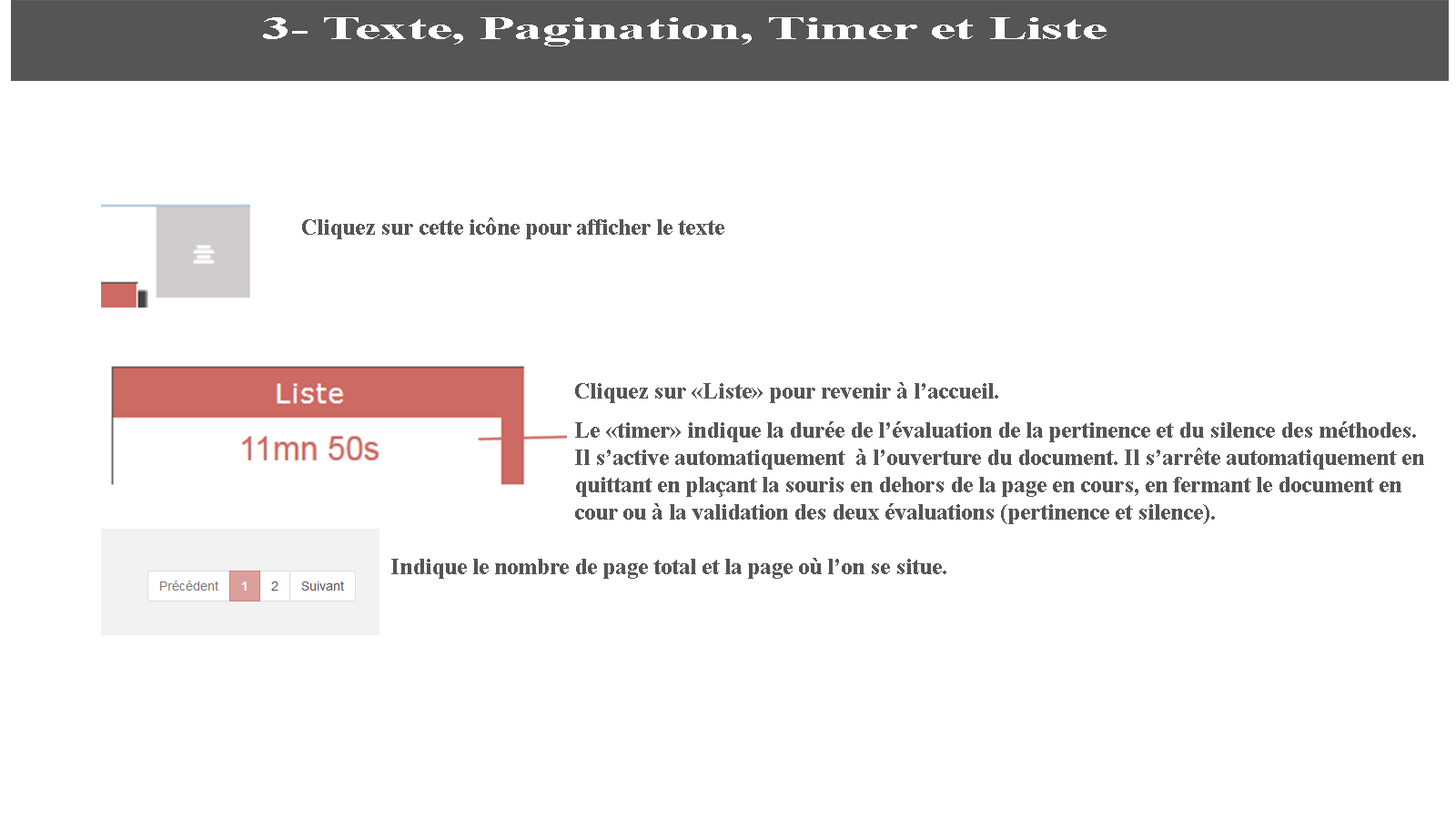
<style>
.page{position:relative;width:1456px;height:819px;background:#ffffff}
.page>*{position:absolute;margin:0}
.t1{font:33.2px "TimesNewRomanPS-BoldMT";color:#ffffff;scale:1.7 1}
.t2{font:10.9px "TimesNewRomanPS-BoldMT";color:#555555}
</style>
<div class="page">
<p class="t1" style="left:263px;top:17px;width:844px;height:29px">3- Texte, Pagination, Timer et Liste</p>
<p class="t2" style="left:302px;top:217px;width:422px;height:22px">Cliquez sur cette icône pour afficher le texte</p>
<p class="t2" style="left:575px;top:382px;width:423px;height:21px">Cliquez sur «Liste» pour revenir à l’accueil.</p>
<p class="t2" style="left:575px;top:421px;width:849px;height:103px">Le «timer» indique la durée de l’évaluation de la pertinence et du silence des méthodes. Il s’active automatiquement  à l’ouverture du document. Il s’arrête automatiquement en quittant en plaçant la souris en dehors de la page en cours, en fermant le document en cour ou à la validation des deux évaluations (pertinence et silence).</p>
<p class="t2" style="left:391px;top:558px;width:555px;height:21px">Indique le nombre de page total et la page où l’on se situe.</p>
</div>
